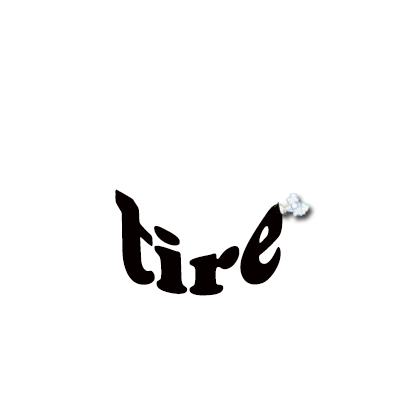
<style>
.page{position:relative;width:400px;height:400px;background:#ffffff}
.page>*{position:absolute;margin:0}
.t1{font:172.1px "CooperBlackStd";color:#060001;scale:0.49 1}
</style>
<div class="page">
<p class="t1" style="left:115px;top:189px;width:168px;height:107px">tire</p>
</div>
